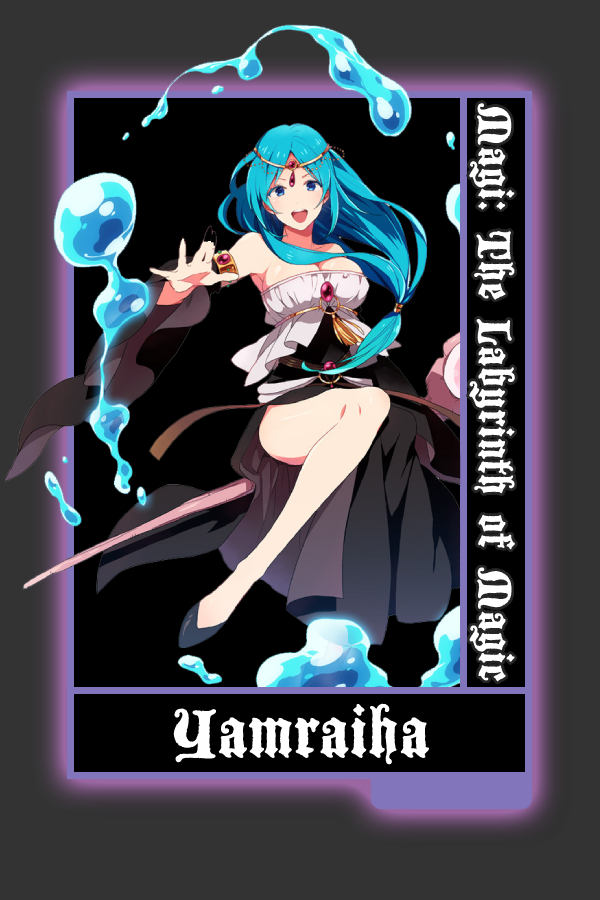
<style>
.page{position:relative;width:600px;height:900px;background:#000000}
.page>*{position:absolute;margin:0}
.t1{font:50px "BlackwoodCastle";color:#ffffff}
.t2{font:75px "BlackwoodCastle";color:#ffffff}
</style>
<div class="page">
<p class="t1" style="left:469px;top:103px;width:46px;height:579px;rotate:90deg">Magi: The Labyrinth of Magic</p>
<p class="t2" style="left:173px;top:703px;width:256px;height:62px">Yamraiha</p>
</div>
